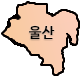
<style>
.page{position:relative;width:82px;height:78px;background:#ffffff}
.page>*{position:absolute;margin:0}
.t1{font:14px "HancomGothicBold";color:#000000}
</style>
<div class="page">
<p class="t1" style="left:29px;top:25px;width:26px;height:15px">울산</p>
</div>
